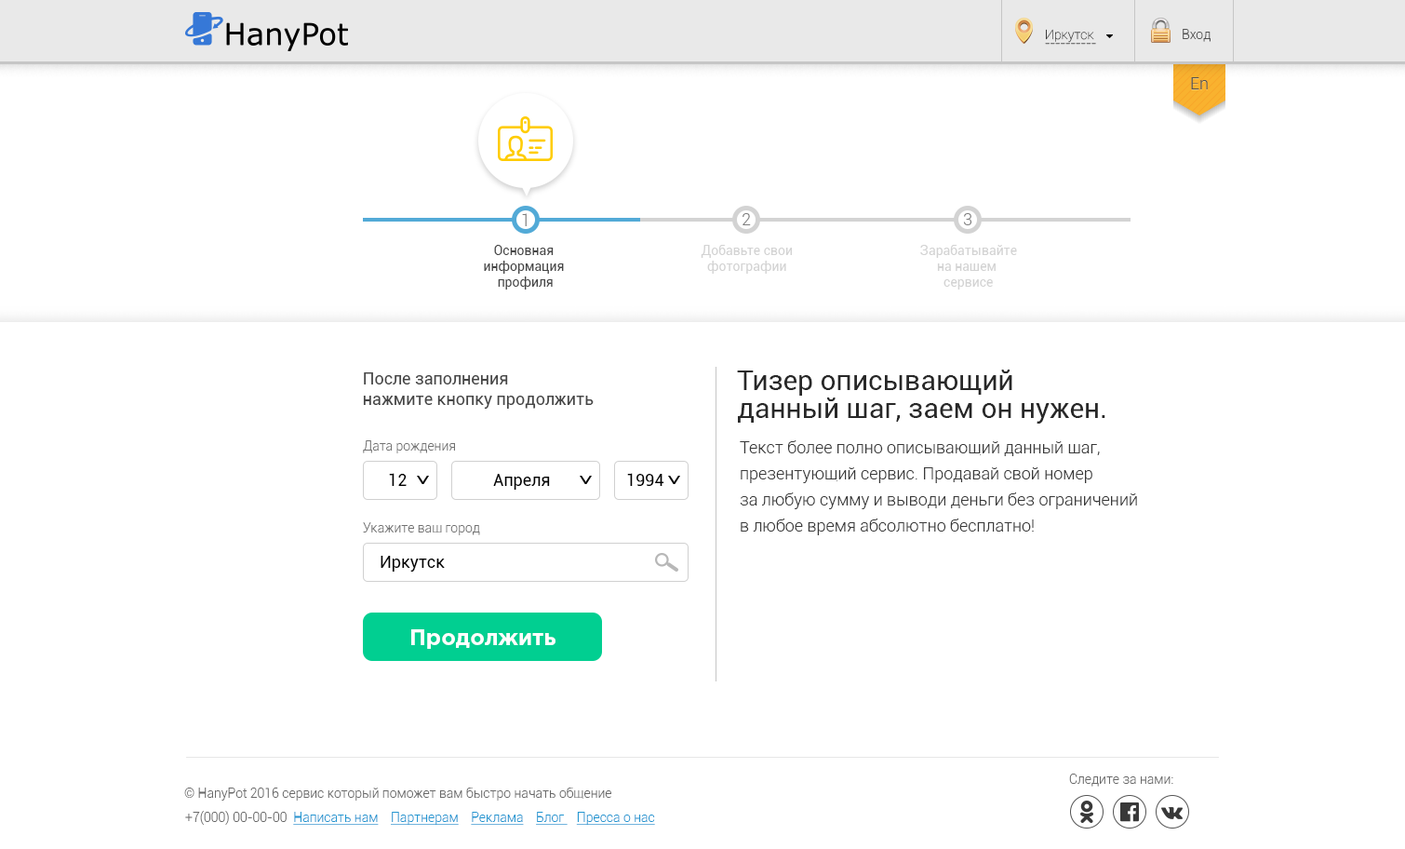
<style>
.page{position:relative;width:1405px;height:849px;background:#ffffff}
.page>*{position:absolute;margin:0}
.t1{font:13px/8.4px "Roboto-Thin";color:#393939}
.t2{font:13px "Roboto-Light";color:#525252}
.t3{font:16.7px "Roboto-Light";color:#525252}
.t4{font:16.7px "Roboto-Light";color:#7e7e7e}
.t5{font:13px "Roboto-Regular";color:#464646}
.t6{font:13px "Roboto-Regular";color:#d3d3d3}
.t7{font:16.7px "Roboto-Regular";color:#464646}
.t8{font:27.9px/27.9px "Roboto-Regular";color:#282828}
.t9{font:13px "Roboto-Light";color:#727272}
.t10{font:16.7px/26.1px "Roboto-Light";color:#393939}
.t11{font:16.7px "Roboto-Regular";color:#000000}
.t12{font:22.3px "GothamPro-Bold";color:#ffffff}
.t13{font:13px "Roboto-Light";color:#696969}
.t14{font:13px "Roboto-Light";color:#2196d1;text-decoration:underline}
</style>
<div class="page">
<p class="t1" style="left:1045px;top:29px;width:51px;height:16px">Иркутск<br>----------</p>
<p class="t2" style="left:1183px;top:29px;width:28px;height:13px">Вход</p>
<p class="t3" style="left:1191px;top:77px;width:17px;height:12px">En</p>
<p class="t4" style="left:522px;top:213px;width:5px;height:13px">1</p>
<p class="t4" style="left:743px;top:213px;width:8px;height:12px">2</p>
<p class="t4" style="left:963px;top:213px;width:9px;height:12px">3</p>
<p class="t5" style="left:484px;top:245px;width:80px;height:44px;text-align:center">Основная <br>информация <br>профиля</p>
<p class="t6" style="left:701px;top:245px;width:92px;height:29px;text-align:center">Добавьте свои<br>фотографии</p>
<p class="t6" style="left:920px;top:245px;width:97px;height:44px;text-align:center">Зарабатывайте<br>на нашем <br>сервисе</p>
<p class="t7" style="left:363px;top:372px;width:231px;height:37px">После заполнения <br>нажмите кнопку продолжить</p>
<p class="t8" style="left:737px;top:369px;width:368px;height:54px">Тизер описывающий<br>данный шаг, заем он нужен.</p>
<p class="t9" style="left:363px;top:440px;width:92px;height:13px">Дата рождения</p>
<p class="t10" style="left:740px;top:440px;width:397px;height:95px">Текст более полно описывающий данный шаг, <br>презентующий сервис. Продавай свой номер <br>за любую сумму и выводи деньги без ограничений <br>в любое время абсолютно бесплатно!</p>
<p class="t11" style="left:389px;top:473px;width:18px;height:13px">12</p>
<p class="t11" style="left:493px;top:474px;width:57px;height:15px">Апреля</p>
<p class="t11" style="left:627px;top:473px;width:37px;height:13px">1994</p>
<p class="t9" style="left:363px;top:522px;width:117px;height:13px">Укажите ваш город</p>
<p class="t11" style="left:381px;top:556px;width:64px;height:15px">Иркутск</p>
<p class="t12" style="left:411px;top:629px;width:145px;height:20px">Продолжить</p>
<p class="t13" style="left:1069px;top:773px;width:104px;height:13px">Следите за нами:</p>
<p class="t13" style="left:184px;top:787px;width:427px;height:13px">© HanyPot 2016 сервис который поможет вам быстро начать общение</p>
<p class="t14" style="left:185px;top:810px;width:470px;height:14px"><span class="t13">+7(000) 00-00-00  </span>Написать нам    Партнерам    Реклама    Блог    Пресса о нас</p>
</div>
